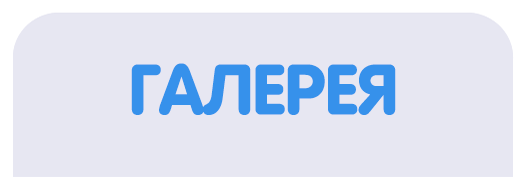
<style>
.page{position:relative;width:526px;height:177px;background:#e7e7f2}
.page>*{position:absolute;margin:0}
.t1{font:70px "VAGWorld-Bold";color:#3691eb}
</style>
<div class="page">
<p class="t1" style="left:131px;top:63px;width:265px;height:52px">ГАЛЕРЕЯ</p>
</div>
